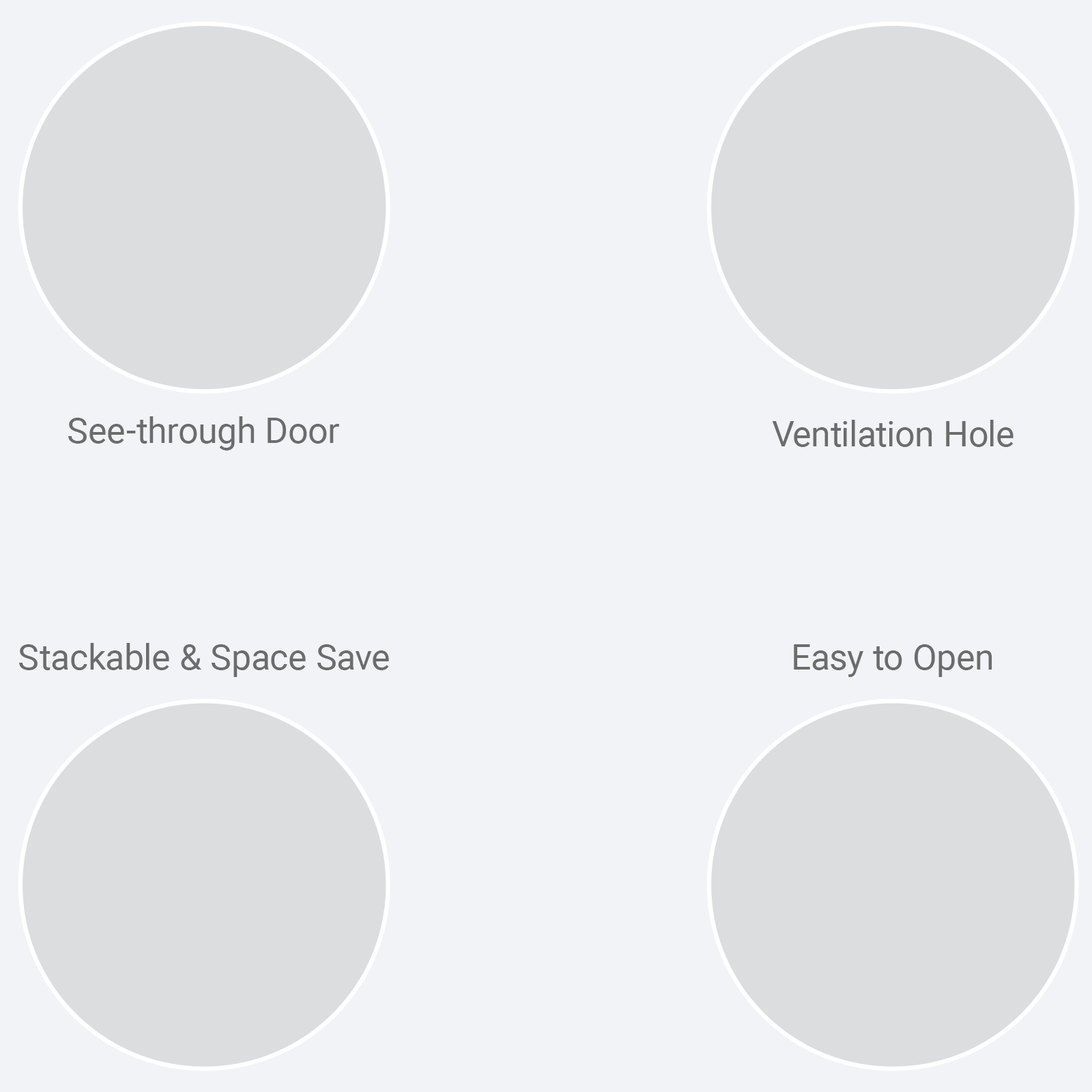
<style>
.page{position:relative;width:1092px;height:1092px;background:#f2f3f6}
.page>*{position:absolute;margin:0}
.t1{font:35.7px "Roboto-Regular";color:#6c6c6c}
</style>
<div class="page">
<p class="t1" style="left:68px;top:416px;width:271px;height:34px">See-through Door</p>
<p class="t1" style="left:772px;top:420px;width:241px;height:27px">Ventilation Hole</p>
<p class="t1" style="left:19px;top:643px;width:370px;height:34px">Stackable &amp; Space Save</p>
<p class="t1" style="left:794px;top:644px;width:198px;height:33px">Easy to Open</p>
</div>
